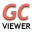
<style>
.page{position:relative;width:32px;height:32px;background:#ffffff}
.page>*{position:absolute;margin:0}
.t1{font:21px "Trebuchet-BoldItalic";color:#f26c4f}
.t2{font:8px "TrebuchetMS-Bold";color:#000000}
</style>
<div class="page">
<p class="t1" style="left:3px;top:3px;width:27px;height:17px">GC</p>
<p class="t2" style="left:2px;top:23px;width:29px;height:6px">VIEWER</p>
</div>
